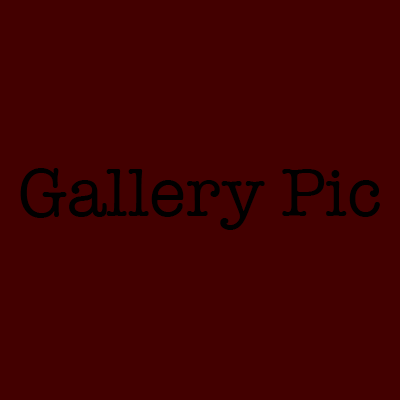
<style>
.page{position:relative;width:400px;height:400px;background:#430000}
.page>*{position:absolute;margin:0}
.t1{font:69.5px "AmericanTypewriter";color:#000000}
</style>
<div class="page">
<p class="t1" style="left:20px;top:168px;width:360px;height:62px">Gallery Pic</p>
</div>
